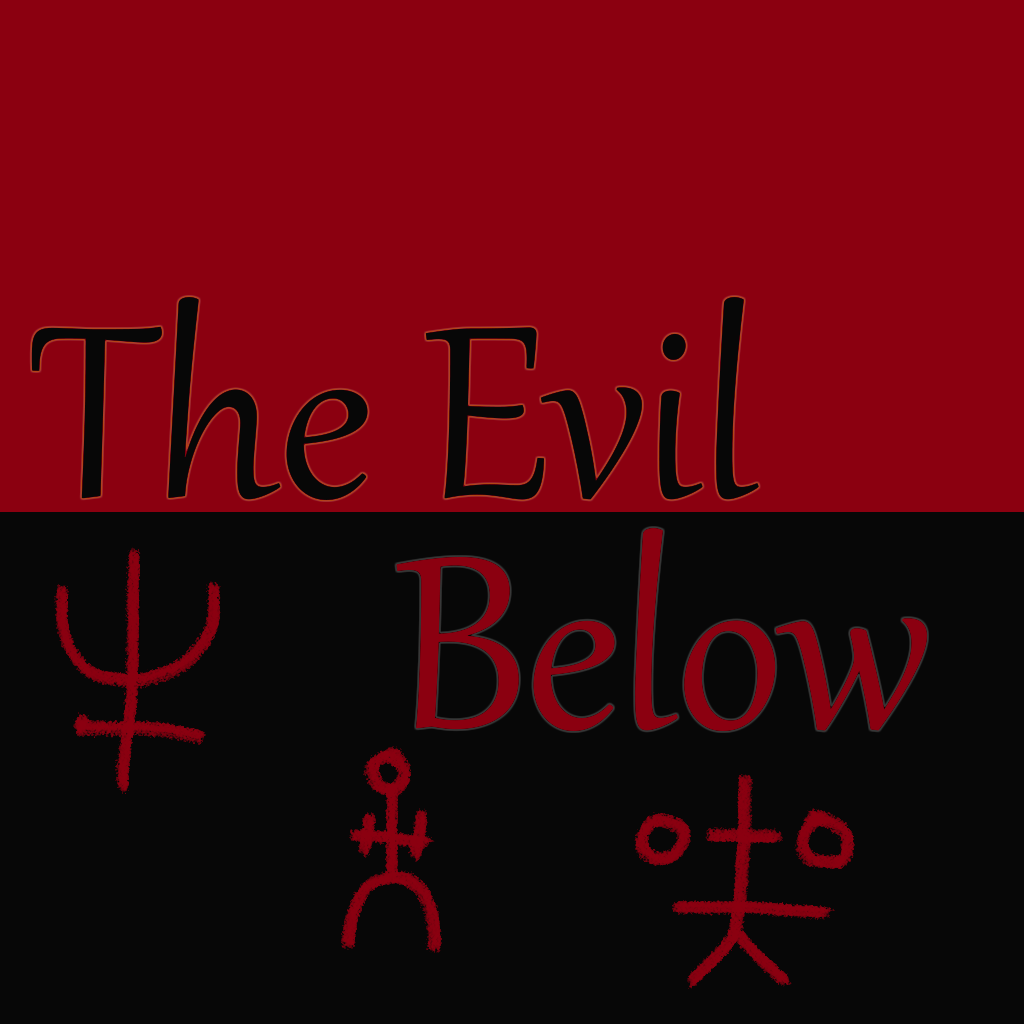
<style>
.page{position:relative;width:1024px;height:1024px;background:#8b0010}
.page>*{position:absolute;margin:0}
.t1{font:300px "Gabriola";color:#070707}
.t2{font:300px "Gabriola";color:#8b0010}
</style>
<div class="page">
<p class="t1" style="left:31px;top:297px;width:728px;height:203px">The Evil</p>
<p class="t2" style="left:396px;top:528px;width:531px;height:203px">Below</p>
</div>
